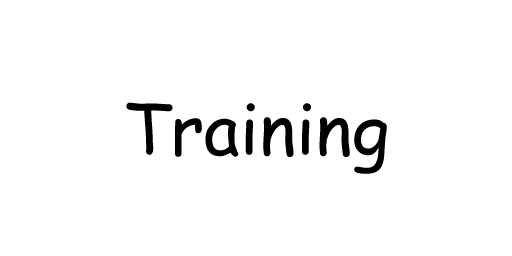
<style>
.page{position:relative;width:512px;height:256px;background:#ffffff}
.page>*{position:absolute;margin:0}
.t1{font:70px "MyriadPro-Regular";color:#000000}
.t2{font:70px "ComicSansMS";color:#000000}
</style>
<div class="page">
<p class="t1" style="left:126px;top:102px;width:261px;height:72px;text-align:center"><span class="t2">Training<br></span>campaign<br>campaign<br>campaign</p>
</div>
